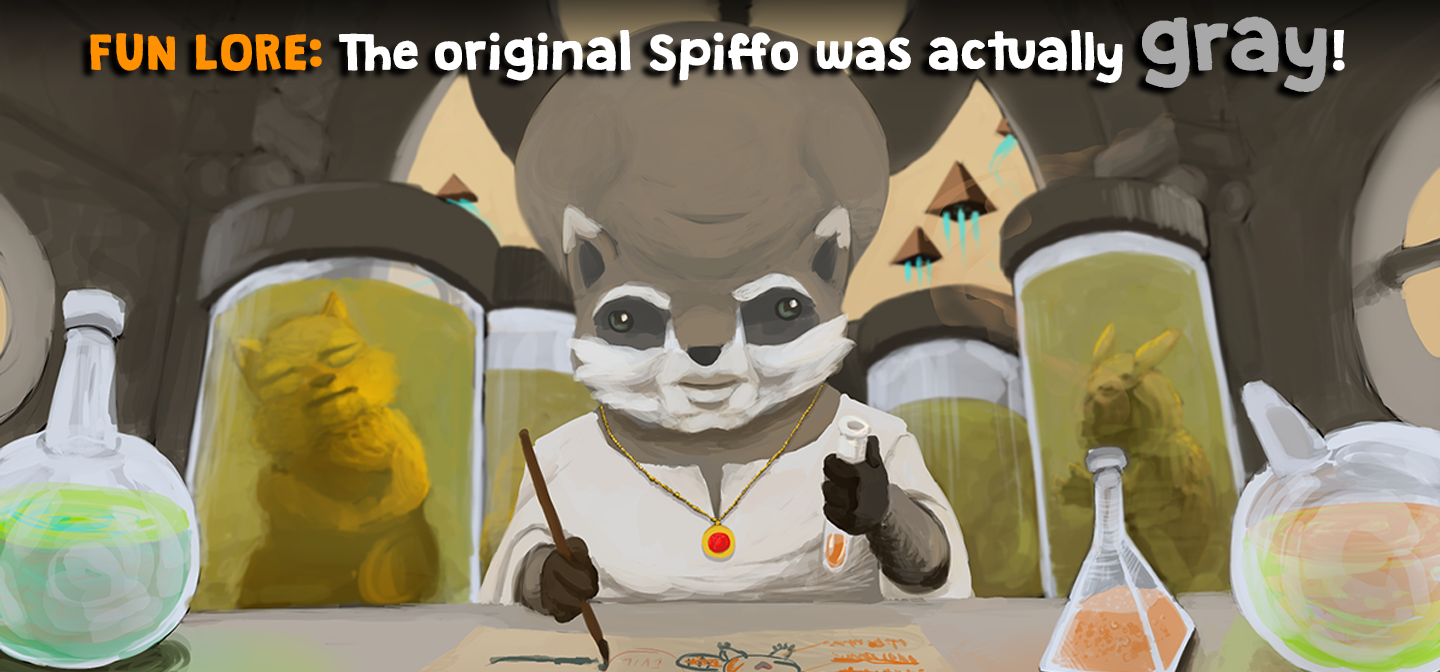
<style>
.page{position:relative;width:1440px;height:672px}
.page>*{position:absolute;margin:0}
.t1{font:44px "GranstanderClean";color:#ffffff;font-weight:bold}
.t2{font:44px "GranstanderClean";color:#ff9000;font-weight:bold}
.t3{font:72px "GranstanderClean";color:#a8a8a8;font-weight:bold}
</style>
<div class="page">
<p class="t1" style="left:90px;top:16px;width:1255px;height:76px"><span class="t2">FUN LORE: </span>The original Spiffo was actually <span class="t3">gray</span>!</p>
</div>
